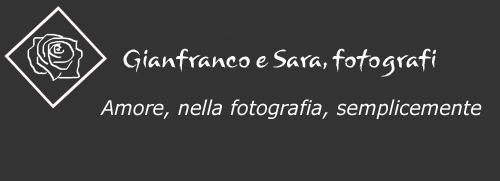
<style>
.page{position:relative;width:500px;height:181px;background:#333333}
.page>*{position:absolute;margin:0}
.t1{font:26.5px "Mushu";color:#fdfcfc;scale:0.92 1}
.t2{font:20.1px "Verdana-Italic";color:#fefdfd;scale:0.95 1}
</style>
<div class="page">
<p class="t1" style="left:123px;top:48px;width:313px;height:29px">Gianfranco e Sara, fotografi</p>
<p class="t2" style="left:100px;top:99px;width:382px;height:20px">Amore, nella fotografia, semplicemente</p>
</div>
